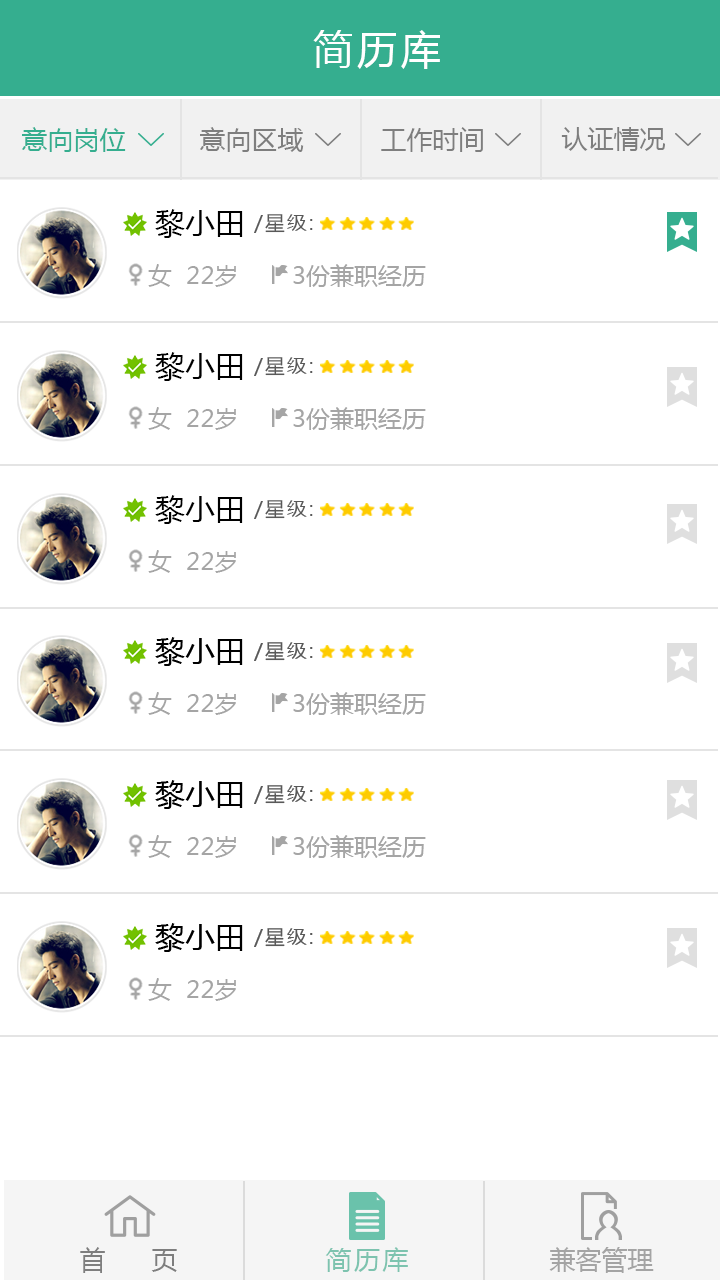
<style>
.page{position:relative;width:720px;height:1280px;background:#ffffff}
.page>*{position:absolute;margin:0}
.t1{font:40px "MicrosoftYaHei";letter-spacing:0.1em;color:#ffffff}
.t2{font:26px "MicrosoftYaHei";color:#35ae8f}
.t3{font:26px "MicrosoftYaHei";color:#7e7e7e}
.t4{font:30px "MicrosoftYaHei";color:#000000}
.t5{font:20px "MicrosoftYaHei";letter-spacing:0.1em;color:#595959}
.t6{font:24px "MicrosoftYaHei";color:#a5a5a5}
.t7{font:26px "MicrosoftYaHei";letter-spacing:0.1em;color:#7dc3af}
.t8{font:26px "MicrosoftYaHei";color:#a4a4a4}
</style>
<div class="page">
<p class="t1" style="left:313px;top:30px;width:127px;height:39px">简历库</p>
<p class="t2" style="left:22px;top:127px;width:104px;height:25px">意向岗位</p>
<p class="t3" style="left:200px;top:127px;width:104px;height:25px">意向区域</p>
<p class="t3" style="left:381px;top:127px;width:102px;height:25px">工作时间</p>
<p class="t3" style="left:561px;top:127px;width:104px;height:24px">认证情况</p>
<p class="t4" style="left:155px;top:209px;width:88px;height:29px">黎小田</p>
<p class="t5" style="left:254px;top:214px;width:59px;height:19px">/星级:</p>
<p class="t6" style="left:148px;top:264px;width:88px;height:23px">女  22岁</p>
<p class="t6" style="left:293px;top:264px;width:133px;height:23px">3份兼职经历</p>
<p class="t4" style="left:155px;top:352px;width:88px;height:29px">黎小田</p>
<p class="t5" style="left:254px;top:357px;width:59px;height:19px">/星级:</p>
<p class="t6" style="left:148px;top:407px;width:88px;height:23px">女  22岁</p>
<p class="t6" style="left:293px;top:407px;width:133px;height:23px">3份兼职经历</p>
<p class="t4" style="left:155px;top:495px;width:88px;height:29px">黎小田</p>
<p class="t5" style="left:254px;top:500px;width:59px;height:19px">/星级:</p>
<p class="t6" style="left:148px;top:550px;width:88px;height:23px">女  22岁</p>
<p class="t3" style="left:80px;top:1247px;width:97px;height:26px">首      页</p>
<p class="t7" style="left:325px;top:1247px;width:83px;height:25px">简历库</p>
<p class="t8" style="left:549px;top:1247px;width:105px;height:26px">兼客管理</p>
</div>
